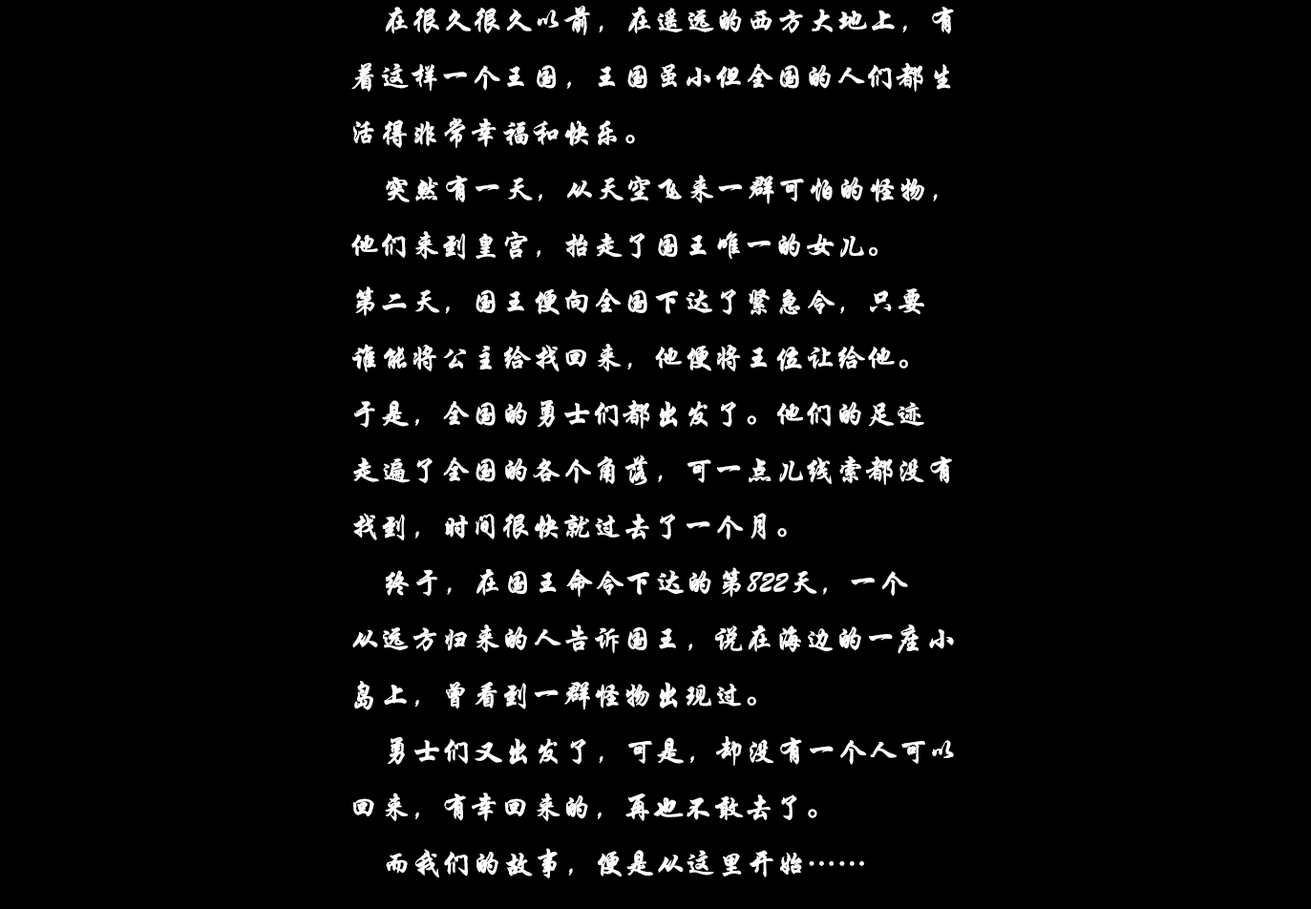
<style>
.page{position:relative;width:1311px;height:909px;background:#000000}
.page>*{position:absolute;margin:0}
.t1{font:29.6px/47.3px "STXingkai";color:#ffffff;font-weight:bold}
</style>
<div class="page">
<p class="t1" style="left:351px;top:6px;width:603px;height:873px">在很久很久以前，在遥远的西方大地上，有<br>着这样一个王国，王国虽小但全国的人们都生<br>活得非常幸福和快乐。<br>    突然有一天，从天空飞来一群可怕的怪物，<br>他们来到皇宫，抬走了国王唯一的女儿。<br>第二天，国王便向全国下达了紧急令，只要<br>谁能将公主给找回来，他便将王位让给他。<br>于是，全国的勇士们都出发了。他们的足迹<br>走遍了全国的各个角落，可一点儿线索都没有<br>找到，时间很快就过去了一个月。<br>    终于，在国王命令下达的第822天，一个<br>从远方归来的人告诉国王，说在海边的一座小<br>岛上，曾看到一群怪物出现过。<br>    勇士们又出发了，可是，却没有一个人可以<br>回来，有幸回来的，再也不敢去了。<br>    而我们的故事，便是从这里开始……</p>
</div>
